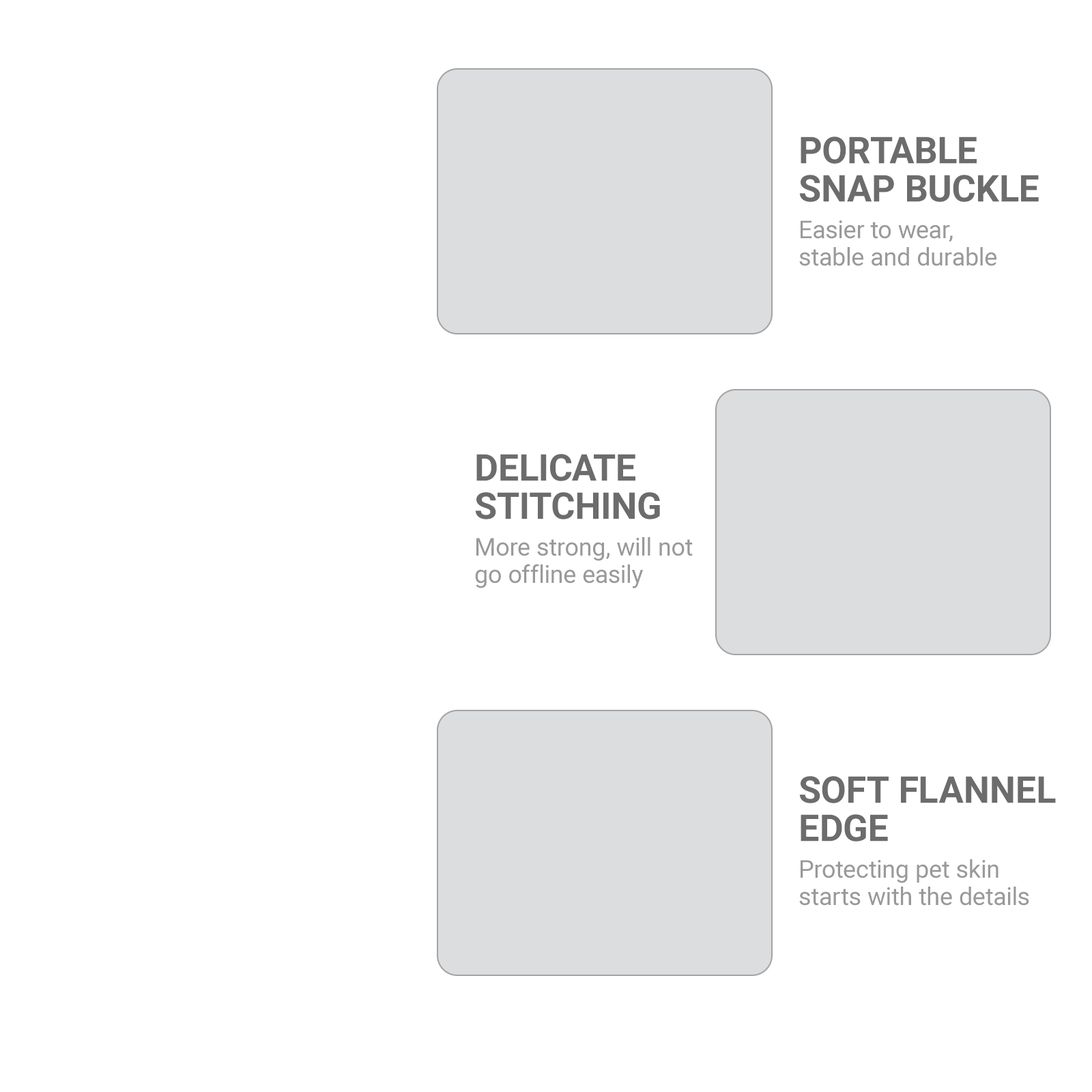
<style>
.page{position:relative;width:1092px;height:1092px;background:#ffffff}
.page>*{position:absolute;margin:0}
.t1{font:36.9px/38.2px "Roboto-Bold";color:#6c6c6c}
.t2{font:24.6px/27.3px "Roboto-Regular";color:#999999}
</style>
<div class="page">
<p class="t1" style="left:799px;top:136px;width:240px;height:66px">PORTABLE<br>SNAP BUCKLE</p>
<p class="t2" style="left:799px;top:220px;width:197px;height:46px">Easier to wear,<br>stable and durable</p>
<p class="t1" style="left:475px;top:454px;width:185px;height:65px">DELICATE<br>STITCHING</p>
<p class="t2" style="left:475px;top:537px;width:218px;height:51px">More strong, will not<br>go offline easily</p>
<p class="t1" style="left:799px;top:776px;width:257px;height:66px">SOFT FLANNEL<br>EDGE</p>
<p class="t2" style="left:799px;top:859px;width:230px;height:47px">Protecting pet skin<br>starts with the details</p>
</div>
